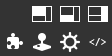
<style>
.page{position:relative;width:112px;height:56px;background:#333333}
.page>*{position:absolute;margin:0}
.t1{font:10px "MalgunGothicBold"}
</style>
<div class="page">
<p class="t1" style="left:89px;top:38px;width:17px;height:8px">&lt;/&gt;</p>
</div>
